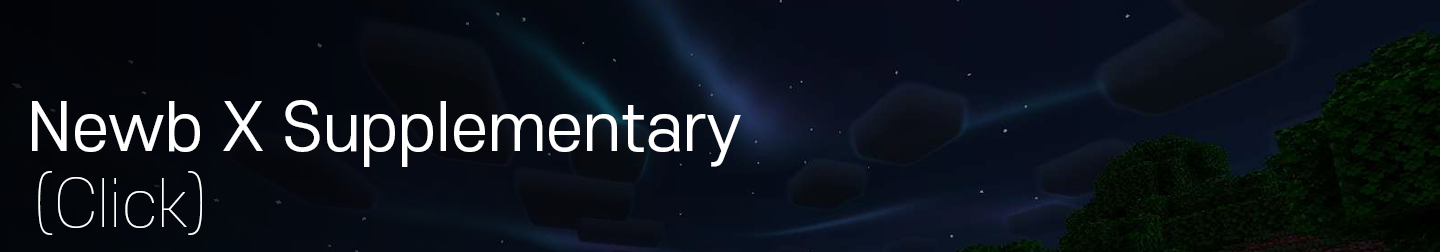
<style>
.page{position:relative;width:1440px;height:252px}
.page>*{position:absolute;margin:0}
.t1{font:64px "S-CoreDream-4Regular";color:#ffffff}
.t2{font:64px "S-CoreDream-1Thin";color:#ffffff}
</style>
<div class="page">
<p class="t1" style="left:32px;top:100px;width:709px;height:67px">Newb X Supplementary</p>
<p class="t2" style="left:38px;top:171px;width:164px;height:64px">(Click)</p>
</div>
